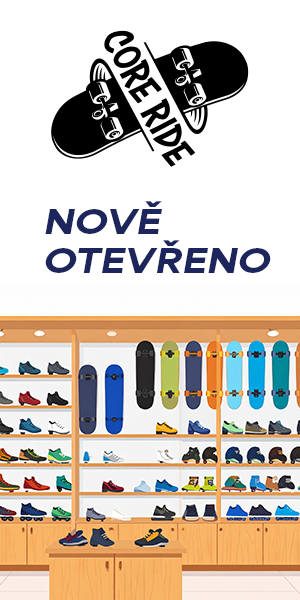
<style>
.page{position:relative;width:300px;height:600px;background:#ffffff}
.page>*{position:absolute;margin:0}
.t1{font:32px "AreaExtended-ExtrablackItalic";color:#1c265c}
</style>
<div class="page">
<p class="t1" style="left:45px;top:201px;width:226px;height:72px">NOVĚ<br>OTEVŘENO</p>
</div>
